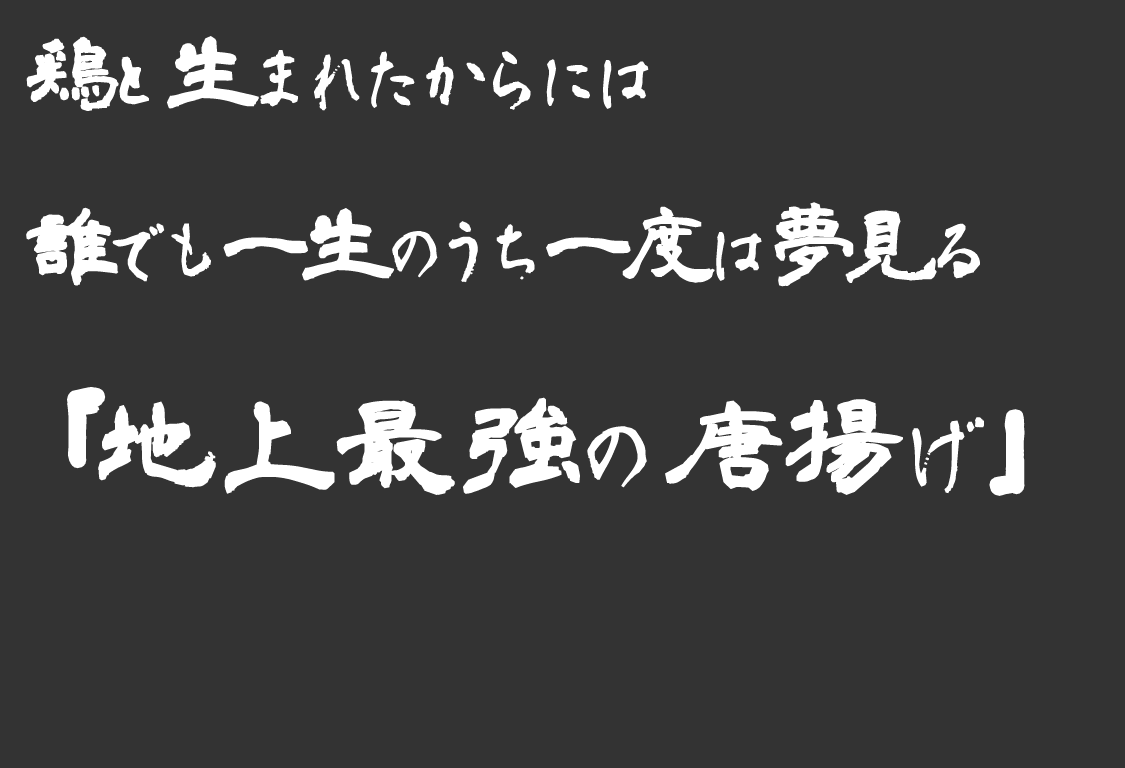
<style>
.page{position:relative;width:1125px;height:768px;background:#333333}
.page>*{position:absolute;margin:0}
.t1{font:72px/172px "aoyagireisyo2";letter-spacing:-0.075em;color:#ffffff;font-weight:bold}
.t2{font:90px/172px "aoyagireisyo2";letter-spacing:-0.075em;color:#ffffff;font-weight:bold}
.t3{font:100px/210px "aoyagireisyo2";color:#ffffff;font-weight:bold}
.t4{font:115px/210px "aoyagireisyo2";color:#ffffff;font-weight:bold}
.t5{font:95px/210px "aoyagireisyo2";color:#ffffff;font-weight:bold}
.t6{font:115px "aoyagireisyo2";color:#ffffff}
</style>
<div class="page">
<p class="t1" style="left:26px;top:36px;width:994px;height:459px"><span class="t2">鶏</span>と<span class="t2">生</span>まれたからには<br><span class="t2">誰</span>でも<span class="t2">一生</span>のうち<span class="t2">一度</span>は<span class="t2">夢見</span>る<br><span class="t3">「</span><span class="t4">地上最強</span><span class="t5">の</span><span class="t4">唐揚</span><span class="t5">げ</span><span class="t4">」</span></p>
<p class="t6" style="left:74px;top:394px;width:25px;height:68px">「</p>
<p class="t6" style="left:996px;top:416px;width:22px;height:73px">」</p>
</div>
